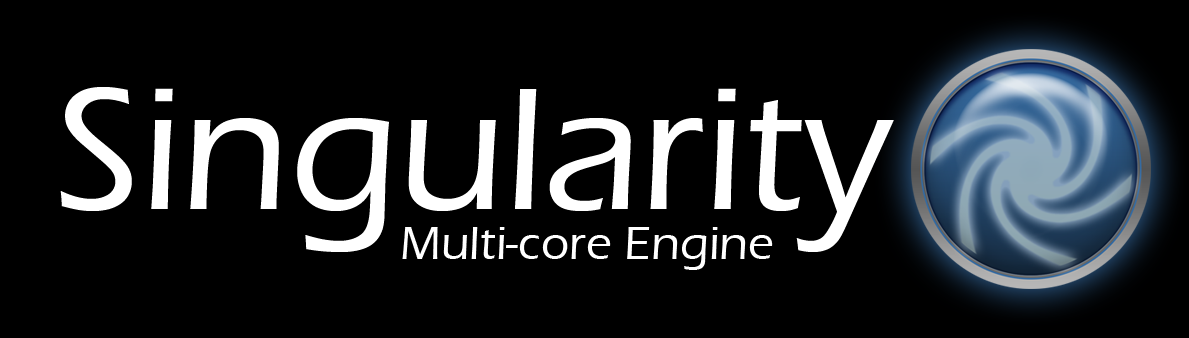
<style>
.page{position:relative;width:1189px;height:338px;background:#000000}
.page>*{position:absolute;margin:0}
.t1{font:180px "ErasITC-Medium";color:#ffffff}
.t2{font:48px "ErasITC-Medium";color:#ffffff}
</style>
<div class="page">
<p class="t1" style="left:60px;top:87px;width:834px;height:165px">Singularity</p>
<p class="t2" style="left:402px;top:227px;width:371px;height:43px">Multi-core Engine</p>
</div>
